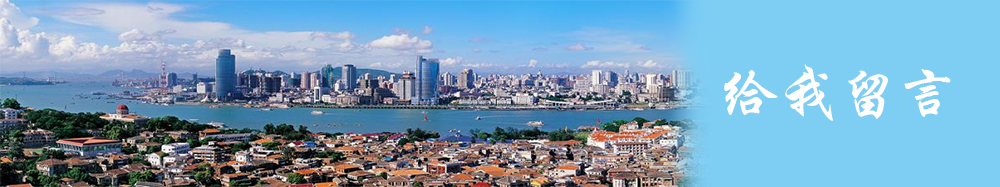
<style>
.page{position:relative;width:1000px;height:187px;background:#7ecef4}
.page>*{position:absolute;margin:0}
.t1{font:60px "STXingkai";color:#ffffff}
</style>
<div class="page">
<p class="t1" style="left:724px;top:64px;width:227px;height:57px">给我留言</p>
</div>
